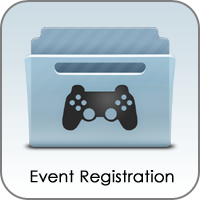
<style>
.page{position:relative;width:200px;height:200px}
.page>*{position:absolute;margin:0}
.t1{font:16px "CenturyGothic";color:#000000;font-weight:bold}
</style>
<div class="page">
<p class="t1" style="left:30px;top:170px;width:144px;height:16px">Event Registration</p>
</div>
